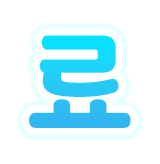
<style>
.page{position:relative;width:160px;height:164px;background:#ffffff}
.page>*{position:absolute;margin:0}
.t1{font:123.2px "Binggrae-Bold";color:#26c9f6;text-transform:uppercase;scale:0.91 1}
</style>
<div class="page">
<p class="t1" style="left:29px;top:35px;width:102px;height:93px">료</p>
</div>
